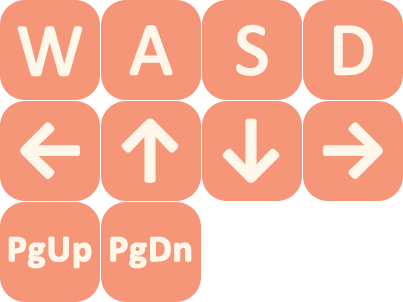
<style>
.page{position:relative;width:403px;height:302px;background:#f69679}
.page>*{position:absolute;margin:0}
.t1{font:75px "Calibri";color:#fff7ea;font-weight:bold}
.t2{font:75px "Calibri-Bold";color:#fff7ea;font-weight:bold}
.t3{font:37.5px "Calibri-Bold";color:#fff7ea;font-weight:bold}
</style>
<div class="page">
<p class="t1" style="left:17px;top:26px;width:66px;height:51px">W</p>
<p class="t1" style="left:129px;top:25px;width:44px;height:51px">A</p>
<p class="t1" style="left:236px;top:24px;width:32px;height:52px">S</p>
<p class="t1" style="left:334px;top:25px;width:39px;height:51px">D</p>
<p class="t2" style="left:20px;top:122px;width:61px;height:57px">←</p>
<p class="t2" style="left:121px;top:118px;width:58px;height:65px">↑</p>
<p class="t2" style="left:222px;top:118px;width:58px;height:65px">↓</p>
<p class="t2" style="left:322px;top:122px;width:61px;height:57px">→</p>
<p class="t3" style="left:8px;top:236px;width:84px;height:33px">PgUp</p>
<p class="t3" style="left:110px;top:236px;width:82px;height:33px">PgDn</p>
</div>
